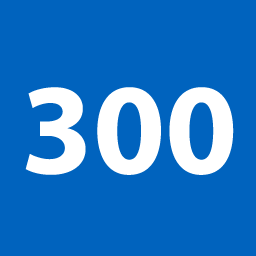
<style>
.page{position:relative;width:256px;height:256px;background:#0063be}
.page>*{position:absolute;margin:0}
.t1{font:130px "MyriadPro-Bold";color:#ffffff}
</style>
<div class="page">
<p class="t1" style="left:25px;top:87px;width:209px;height:88px">300</p>
</div>
